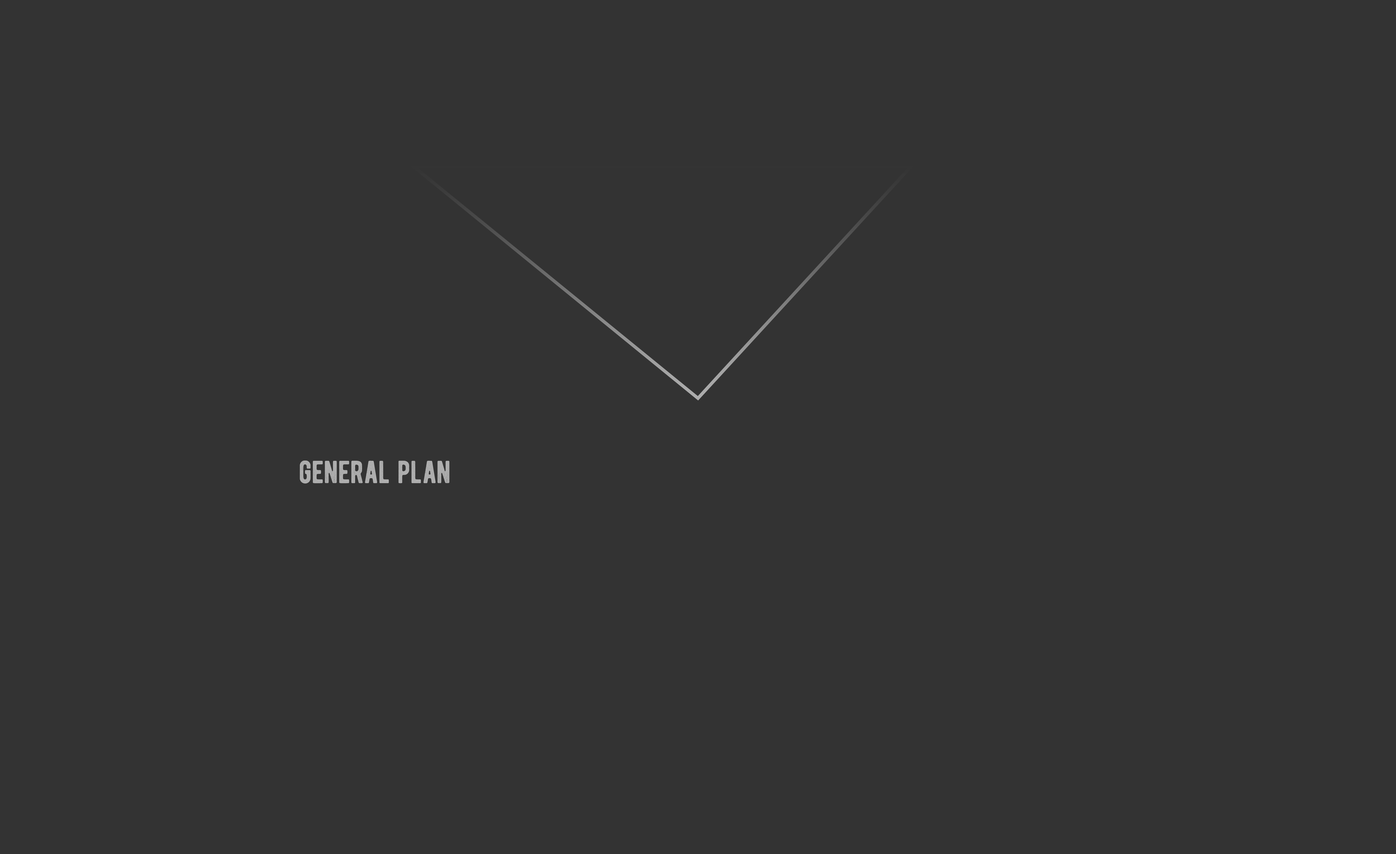
<style>
.page{position:relative;width:1396px;height:854px;background:#333333}
.page>*{position:absolute;margin:0}
.t1{font:31.9px "BERNIERDISTRESSED";color:#aeaeae}
</style>
<div class="page">
<p class="t1" style="left:300px;top:461px;width:149px;height:23px">general plan</p>
</div>
